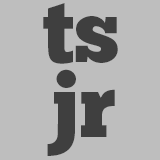
<style>
.page{position:relative;width:160px;height:160px;background:#bebebe}
.page>*{position:absolute;margin:0}
.t1{font:90px/75px "ChunkFive";color:#3f3f3f}
</style>
<div class="page">
<p class="t1" style="left:43px;top:3px;width:75px;height:153px;text-align:center">ts<br>jr</p>
</div>
